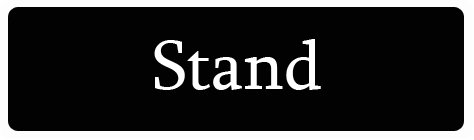
<style>
.page{position:relative;width:474px;height:140px;background:#030202}
.page>*{position:absolute;margin:0}
.t1{font:72px "Sylfaen";color:#ffffff}
</style>
<div class="page">
<p class="t1" style="left:154px;top:39px;width:167px;height:51px">Stand</p>
</div>
